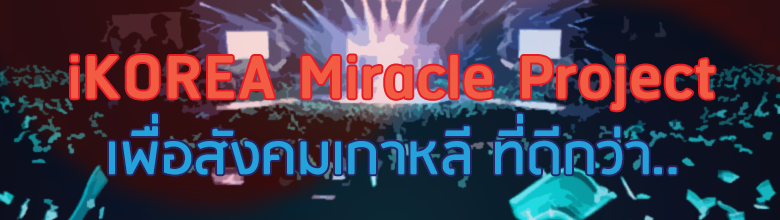
<style>
.page{position:relative;width:780px;height:220px}
.page>*{position:absolute;margin:0}
.t1{font:77.3px "RSU-Bold";color:#f15c42}
.t2{font:65.8px "RSU-Bold";color:#24a2db}
</style>
<div class="page">
<p class="t1" style="left:71px;top:55px;width:644px;height:56px">iKOREA Miracle Project</p>
<p class="t2" style="left:109px;top:113px;width:568px;height:62px">เพื่อสังคมเกาหลี ที่ดีกว่า..</p>
</div>
